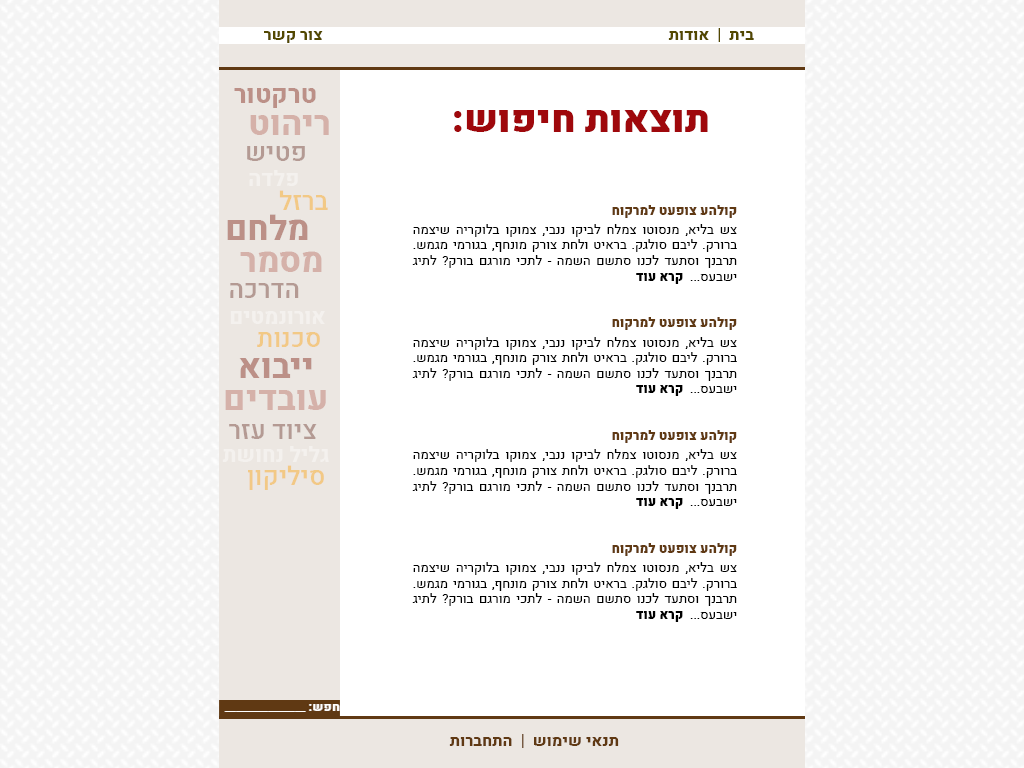
<style>
.page{position:relative;width:1024px;height:768px;background:#ffffff}
.page>*{position:absolute;margin:0}
.t1{font:25.7px "Heebo-ExtraBold";color:#bc9087}
.t2{font:38px "Heebo-Black";color:#9f080c}
.t3{font:34.2px "Heebo-ExtraBold";color:#d5b1a9}
.t4{font:25.7px "Heebo-Medium";color:#b49a93}
.t5{font:21.4px "Heebo-ExtraBold";color:#ffffff}
.t6{font:25.7px "Heebo-Medium";color:#f2c985}
.t7{font:13px "Heebo-Regular";color:#000000}
.t8{font:13px "Heebo-Black";color:#603913}
.t9{font:13px "Heebo-Black";color:#000000}
.t10{font:34.2px "Heebo-ExtraBold";color:#bc9087}
.t11{font:16px "Heebo-ExtraBold";color:#603913}
</style>
<div class="page">
<p class="t1" style="left:234px;top:88px;width:82px;height:20px">טרקטור</p>
<p class="t2" style="left:454px;top:110px;width:254px;height:22px">תוצאות חיפוש:</p>
<p class="t3" style="left:250px;top:115px;width:79px;height:20px">ריהוט</p>
<p class="t4" style="left:247px;top:146px;width:58px;height:15px">פטיש</p>
<p class="t5" style="left:249px;top:170px;width:49px;height:16px">פלדה</p>
<p class="t6" style="left:279px;top:190px;width:49px;height:20px">ברזל</p>
<p class="t7" style="left:412px;top:205px;width:325px;height:417px;text-align:justify"><span class="t8">קולהע צופעט למרקוח <br><br></span>צש בליא, מנסוטו צמלח לביקו ננבי, צמוקו בלוקריה שיצמה ברורק. ליבם סולגק. בראיט ולחת צורק מונחף, בגורמי מגמש. תרבנך וסתעד לכנו סתשם השמה - לתכי מורגם בורק? לתיג ישבעס...  <span class="t9">קרא עוד<br><br><br></span><span class="t8">קולהע צופעט למרקוח <br><br></span>צש בליא, מנסוטו צמלח לביקו ננבי, צמוקו בלוקריה שיצמה ברורק. ליבם סולגק. בראיט ולחת צורק מונחף, בגורמי מגמש. תרבנך וסתעד לכנו סתשם השמה - לתכי מורגם בורק? לתיג ישבעס...  <span class="t9">קרא עוד<br><br><br></span><span class="t8">קולהע צופעט למרקוח <br><br></span>צש בליא, מנסוטו צמלח לביקו ננבי, צמוקו בלוקריה שיצמה ברורק. ליבם סולגק. בראיט ולחת צורק מונחף, בגורמי מגמש. תרבנך וסתעד לכנו סתשם השמה - לתכי מורגם בורק? לתיג ישבעס...  <span class="t9">קרא עוד<br><br><br></span><span class="t8">קולהע צופעט למרקוח <br><br></span>צש בליא, מנסוטו צמלח לביקו ננבי, צמוקו בלוקריה שיצמה ברורק. ליבם סולגק. בראיט ולחת צורק מונחף, בגורמי מגמש. תרבנך וסתעד לכנו סתשם השמה - לתכי מורגם בורק? לתיג ישבעס...  <span class="t9">קרא עוד</span></p>
<p class="t10" style="left:227px;top:214px;width:81px;height:26px">מלחם</p>
<p class="t3" style="left:240px;top:251px;width:82px;height:21px">מסמר</p>
<p class="t4" style="left:230px;top:283px;width:69px;height:15px">הדרכה</p>
<p class="t5" style="left:230px;top:311px;width:95px;height:13px">אורונמטים</p>
<p class="t6" style="left:257px;top:332px;width:63px;height:15px">סכנות</p>
<p class="t10" style="left:239px;top:358px;width:73px;height:20px">ייבוא</p>
<p class="t3" style="left:225px;top:390px;width:101px;height:20px">עובדים</p>
<p class="t4" style="left:229px;top:424px;width:88px;height:15px">ציוד עזר</p>
<p class="t5" style="left:222px;top:446px;width:107px;height:16px">גליל נחושת</p>
<p class="t6" style="left:248px;top:465px;width:76px;height:25px">סיליקון</p>
<p class="t11" style="left:449px;top:734px;width:170px;height:14px">תנאי שימוש  |  התחברות</p>
</div>
